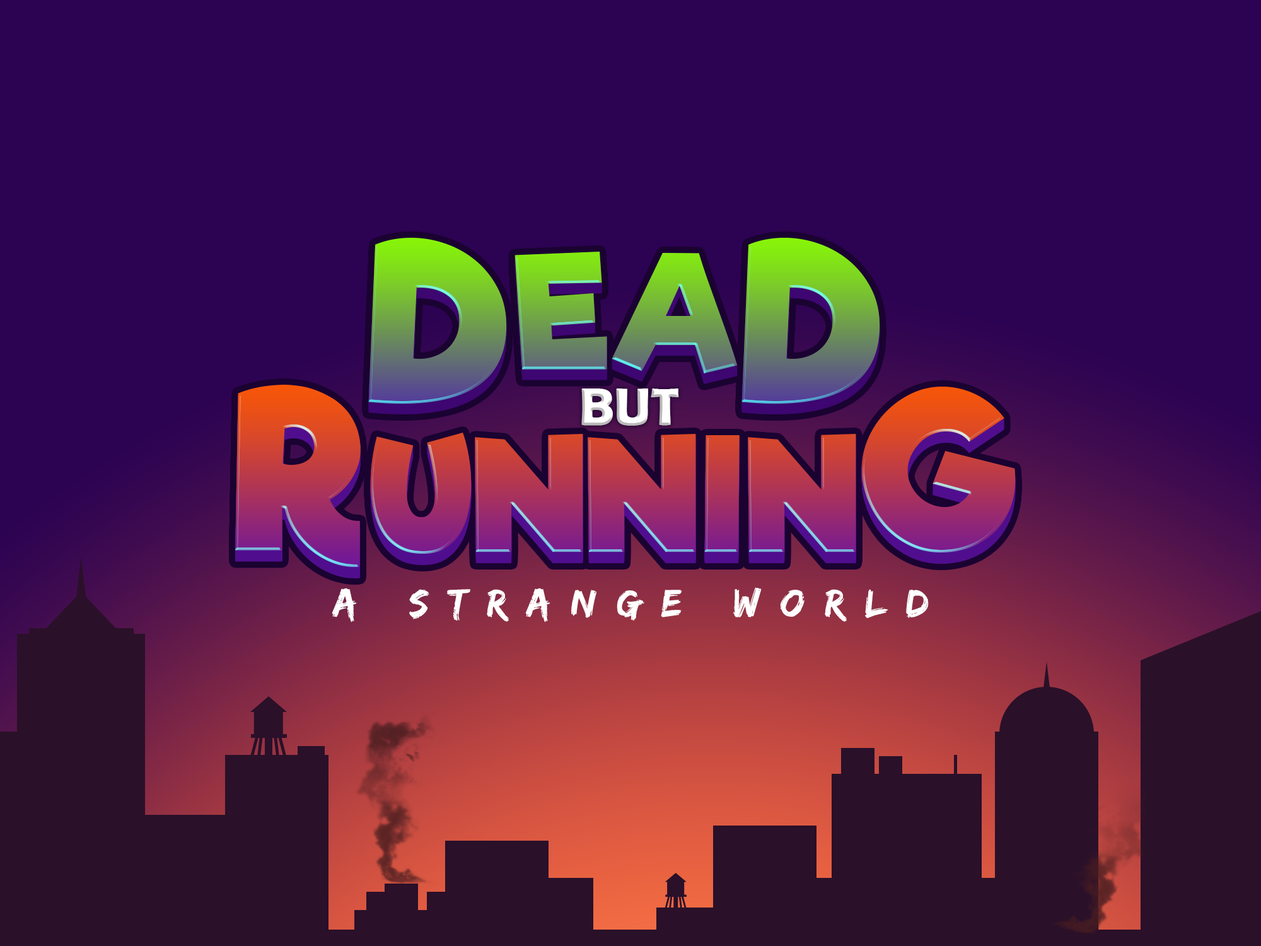
<style>
.page{position:relative;width:1261px;height:946px;background:#2c0252}
.page>*{position:absolute;margin:0}
.t1{font:53.6px "BerlinSansFBDemi-Bold";color:#ffffff}
.t2{font:40.4px "Edo";letter-spacing:0.5em;color:#ffffff}
</style>
<div class="page">
<p class="t1" style="left:581px;top:388px;width:98px;height:38px">BUT</p>
<p class="t2" style="left:332px;top:587px;width:597px;height:35px">A strange World</p>
</div>
